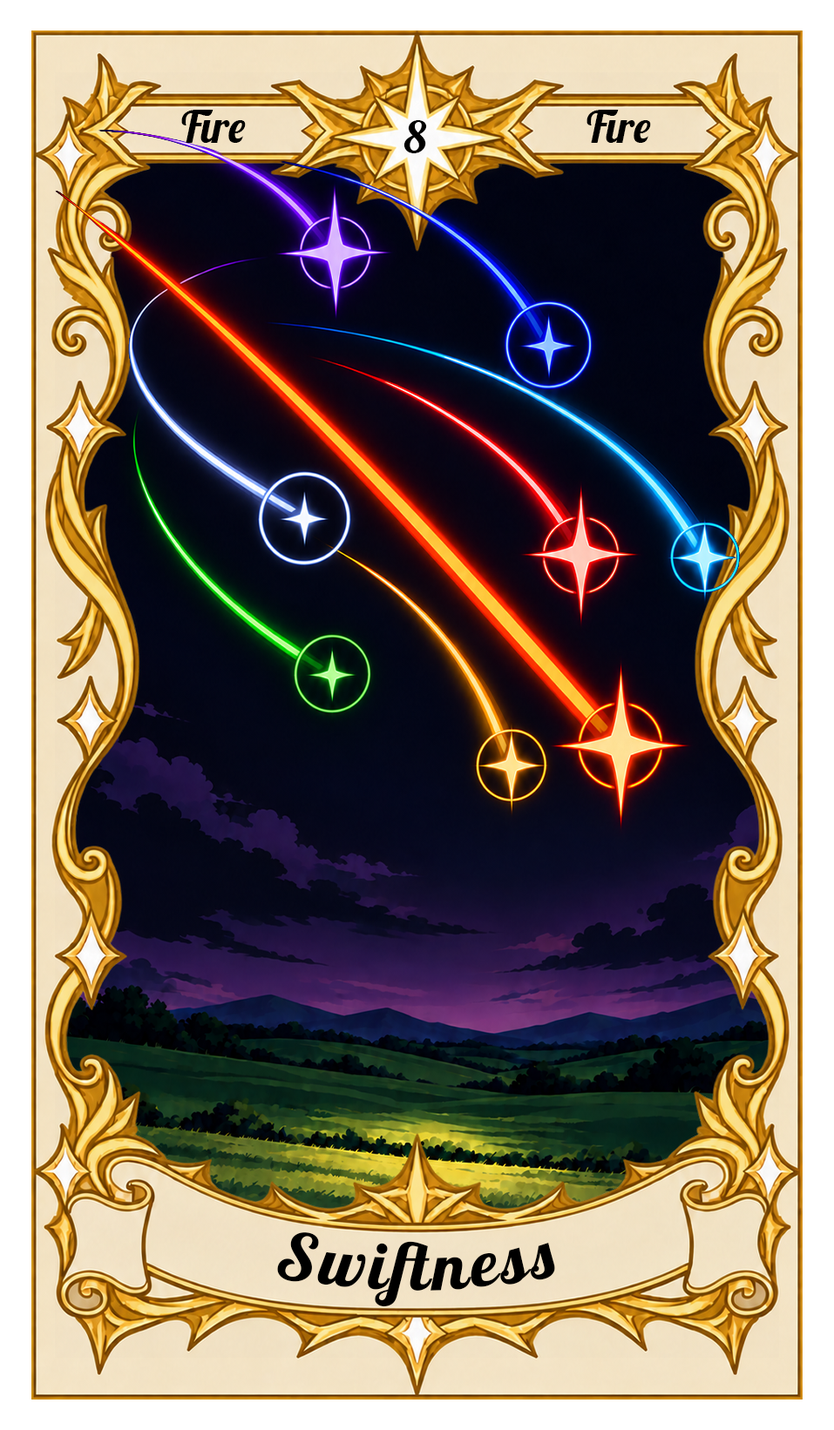
<style>
.page{position:relative;width:834px;height:1430px}
.page>*{position:absolute;margin:0}
.t1{font:43.6px "Lobster-Regular";color:#000000}
.t2{font:65.3px "Lobster-Regular";letter-spacing:0.05em;color:#000000}
</style>
<div class="page">
<p class="t1" style="left:181px;top:110px;width:65px;height:33px">Fire</p>
<p class="t1" style="left:586px;top:110px;width:65px;height:33px">Fire</p>
<p class="t1" style="left:403px;top:120px;width:24px;height:33px">8</p>
<p class="t2" style="left:277px;top:1233px;width:278px;height:74px">Swiftness</p>
</div>
